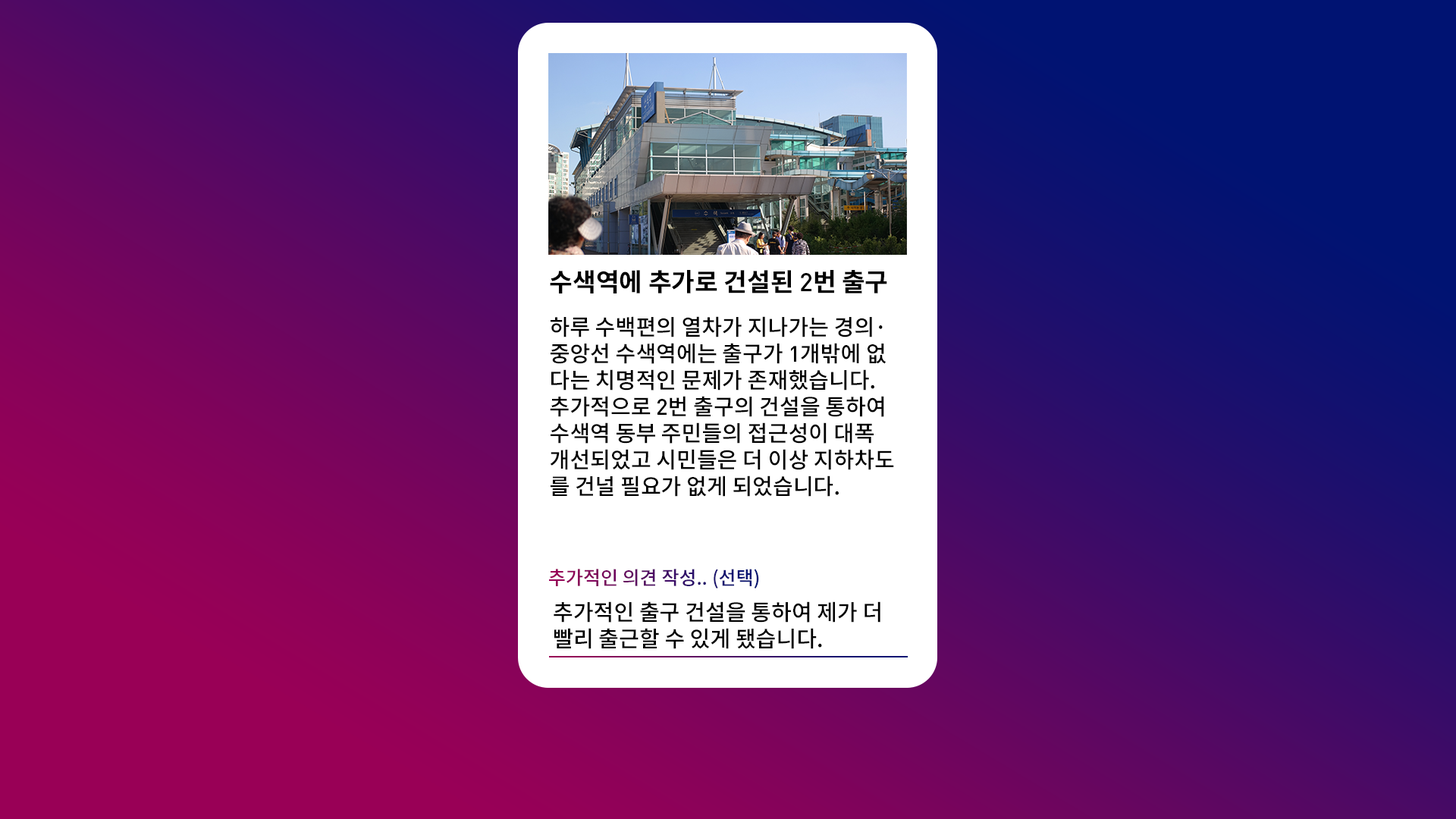
<style>
.page{position:relative;width:1456px;height:819px}
.page>*{position:absolute;margin:0}
.t1{font:25.3px "NotoSansCJKkr-Bold";color:#000000}
.t2{font:25.3px "DIN-Medium";color:#000000}
.t3{font:22.1px "NotoSansCJKkr-Medium";color:#000000}
.t4{font:22.1px "DIN-Medium";color:#000000}
.t5{font:19px "NotoSansCJKkr-Medium"}
</style>
<div class="page">
<p class="t1" style="left:550px;top:270px;width:337px;height:23px">수색역에 추가로 건설된 <span class="t2">2</span>번 출구</p>
<p class="t3" style="left:550px;top:316px;width:344px;height:181px">하루 수백편의 열차가 지나가는 경의·<br>중앙선 수색역에는 출구가 <span class="t4">1</span>개밖에 없<br>다는 치명적인 문제가 존재했습니다.<br>추가적으로 <span class="t4">2</span>번 출구의 건설을 통하여<br>수색역 동부 주민들의 접근성이 대폭<br>개선되었고 시민들은 더 이상 지하차도<br>를 건널 필요가 없게 되었습니다.</p>
<p class="t5" style="left:549px;top:569px;width:210px;height:19px">추가적인 의견 작성.. (선택)</p>
<p class="t3" style="left:554px;top:601px;width:326px;height:48px">추가적인 출구 건설을 통하여 제가 더 <br>빨리 출근할 수 있게 됐습니다.</p>
</div>
